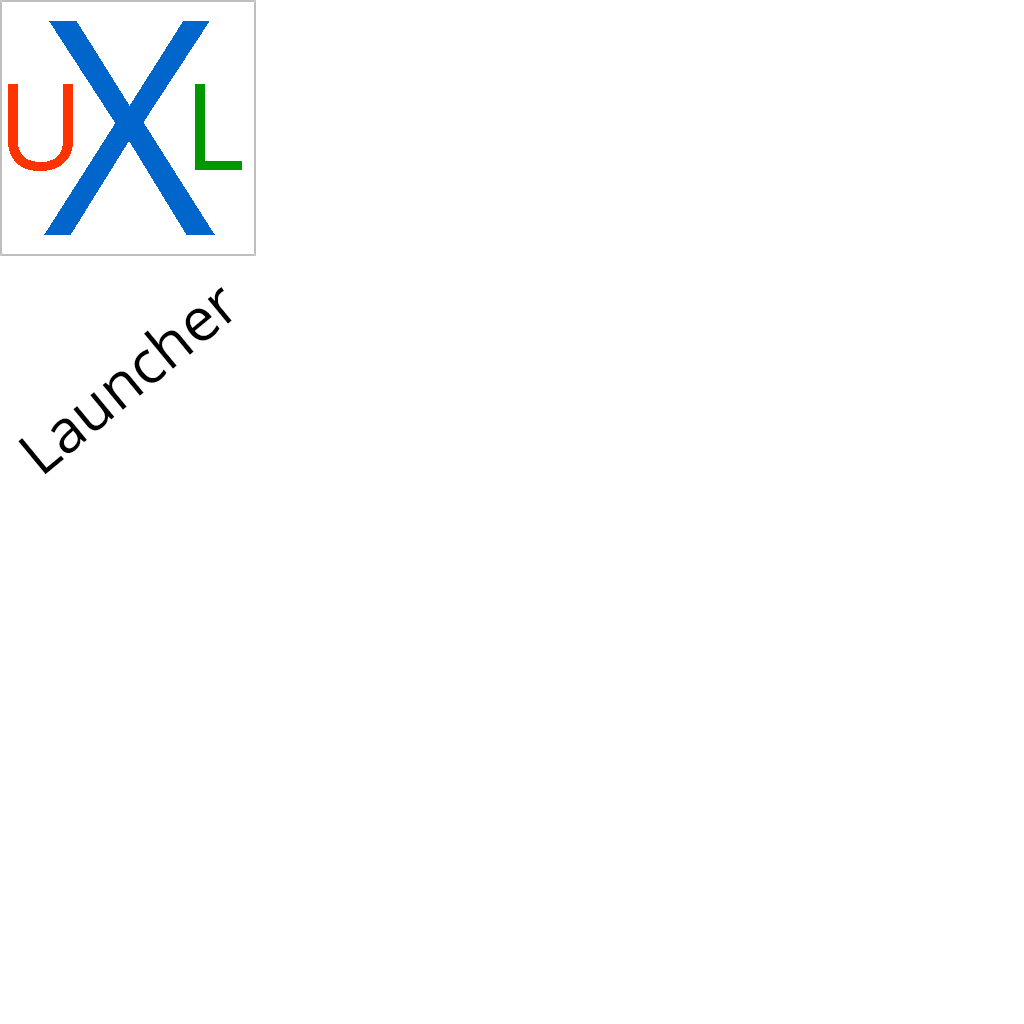
<style>
.page{position:relative;width:1024px;height:1024px;background:#ffffff}
.page>*{position:absolute;margin:0}
.t1{font:300px "OpenSans";color:#0066cc}
.t2{font:120px "OpenSans";color:#ff3300}
.t3{font:120px "OpenSans";color:#009800}
.t4{font:60px "OpenSans";color:#000000}
</style>
<div class="page">
<p class="t1" style="left:44px;top:21px;width:171px;height:214px">X</p>
<p class="t2" style="left:8px;top:84px;width:65px;height:87px">U</p>
<p class="t3" style="left:195px;top:84px;width:47px;height:86px">L</p>
<p class="t4" style="left:18px;top:287px;width:214px;height:188px;rotate:-40deg">Launcher</p>
</div>
